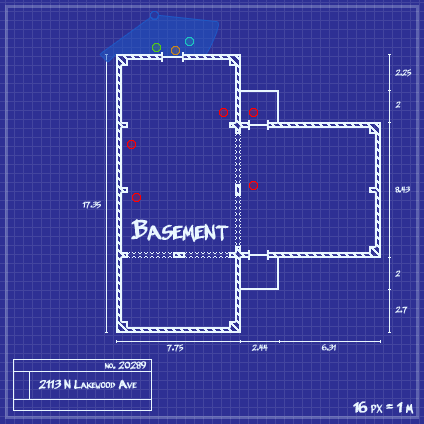
<style>
.page{position:relative;width:424px;height:424px;background:#2e3094}
.page>*{position:absolute;margin:0}
.t1{font:8px "BelligerentMadness";letter-spacing:-0.04em;color:#e9f7ff;font-variant:small-caps;font-weight:bold}
.t2{font:29px "BelligerentMadness";letter-spacing:-0.04em;color:#e9f7ff;font-variant:small-caps;font-weight:bold}
.t3{font:10px "BelligerentMadness";letter-spacing:-0.04em;color:#e9f7ff;font-variant:small-caps;font-weight:bold}
.t4{font:12px "BelligerentMadness";letter-spacing:-0.04em;color:#e9f7ff;font-variant:small-caps;font-weight:bold}
.t5{font:15px "BelligerentMadness";letter-spacing:-0.04em;color:#e9f7ff;font-variant:small-caps;font-weight:bold}
</style>
<div class="page">
<p class="t1" style="left:395px;top:69px;width:17px;height:8px">2.25</p>
<p class="t1" style="left:395px;top:101px;width:6px;height:7px">2</p>
<p class="t1" style="left:395px;top:186px;width:15px;height:7px">8.43</p>
<p class="t1" style="left:82px;top:201px;width:19px;height:8px">17.35</p>
<p class="t2" style="left:131px;top:219px;width:98px;height:23px">Basement</p>
<p class="t1" style="left:395px;top:270px;width:6px;height:7px">2</p>
<p class="t1" style="left:395px;top:306px;width:13px;height:8px">2.7</p>
<p class="t1" style="left:166px;top:344px;width:18px;height:8px">7.75</p>
<p class="t1" style="left:251px;top:344px;width:17px;height:7px">2.44</p>
<p class="t1" style="left:321px;top:344px;width:15px;height:7px">6.31</p>
<p class="t3" style="left:105px;top:361px;width:42px;height:9px">no. 20289</p>
<p class="t4" style="left:38px;top:379px;width:99px;height:11px">2113 N Lakewood Ave</p>
<p class="t5" style="left:353px;top:401px;width:61px;height:13px">16 px = 1 m</p>
</div>
